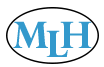
<style>
.page{position:relative;width:104px;height:67px;background:#ffffff}
.page>*{position:absolute;margin:0}
.t1{font:36px "PerpetuaTitlingMT-Bold";color:#3399cc}
.t2{font:36px "CopperplateGothic-Bold";color:#3399cc}
</style>
<div class="page">
<p class="t1" style="left:13px;top:21px;width:79px;height:27px">m h <span class="t2">h</span></p>
<p class="t1" style="left:46px;top:30px;width:22px;height:27px">l</p>
</div>
